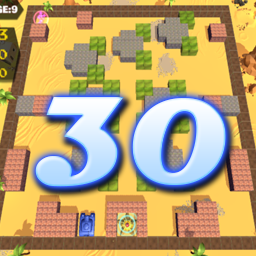
<style>
.page{position:relative;width:256px;height:256px}
.page>*{position:absolute;margin:0}
.t1{font:126.5px "Magneto-Bold";letter-spacing:0.02em;scale:1.1 1}
</style>
<div class="page">
<p class="t1" style="left:35px;top:97px;width:191px;height:90px">30</p>
</div>
